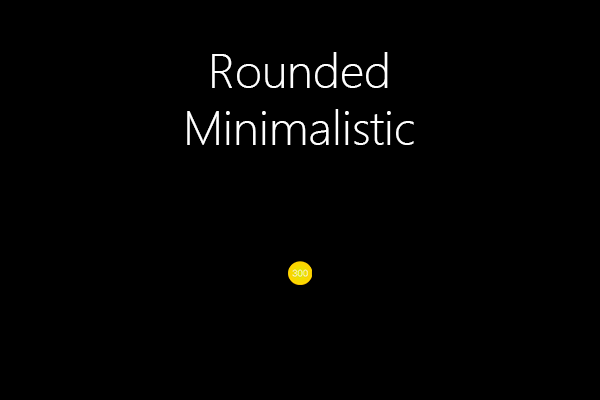
<style>
.page{position:relative;width:600px;height:400px;background:#000000}
.page>*{position:absolute;margin:0}
.t1{font:48px "SegoeUI-Light";color:#ffffff}
</style>
<div class="page">
<p class="t1" style="left:187px;top:52px;width:227px;height:93px;text-align:center">Rounded<br>Minimalistic</p>
</div>
